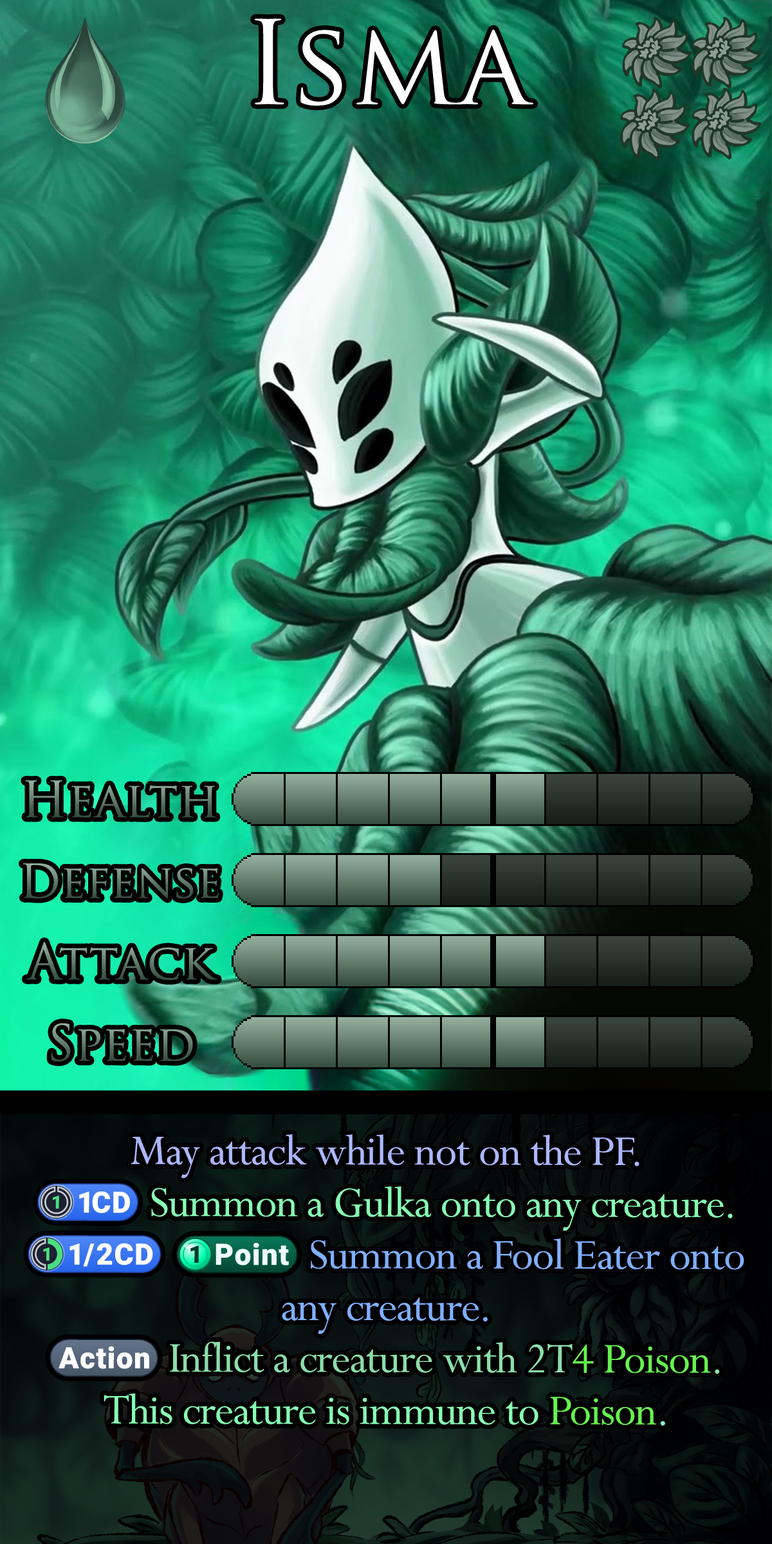
<style>
.page{position:relative;width:772px;height:1544px}
.page>*{position:absolute;margin:0}
.t1{font:194.3px "TrajanPro-Regular";color:#ffffff}
.t2{font:83.6px "TrajanPro-Regular"}
.t3{font:78.5px "TrajanPro-Regular"}
.t4{font:47.6px/51.9px "Perpetua";letter-spacing:-0.02em}
.t5{font:38.7px/51.9px "stoogedings-Regular"}
.t6{font:38.7px/51.9px "stoogedings-Regular";letter-spacing:0.345em}
</style>
<div class="page">
<p class="t1" style="left:255px;top:19px;width:279px;height:87px">Isma</p>
<p class="t2" style="left:25px;top:781px;width:191px;height:37px">Health</p>
<p class="t3" style="left:23px;top:864px;width:196px;height:35px">Defense</p>
<p class="t2" style="left:26px;top:942px;width:191px;height:39px">Attack</p>
<p class="t2" style="left:51px;top:1023px;width:142px;height:39px">Speed</p>
<p class="t4" style="left:28px;top:1134px;width:716px;height:292px;text-align:center">May attack while not on the PF.<br><span class="t5">(1CD)</span> Summon a Gulka onto any creature.<br><span class="t6">(1/2CD)</span><span class="t5">(1 point)</span> Summon a Fool Eater onto any creature.<br><span class="t5">(Action)</span> Inflict a creature with 2T4 Poison.<br>This creature is immune to Poison.</p>
</div>
